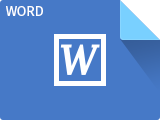
<style>
.page{position:relative;width:160px;height:120px;background:#4679c7}
.page>*{position:absolute;margin:0}
.t1{font:14px "FiraSans-Regular";color:#ffffff}
</style>
<div class="page">
<p class="t1" style="left:6px;top:6px;width:37px;height:10px">WORD</p>
</div>
